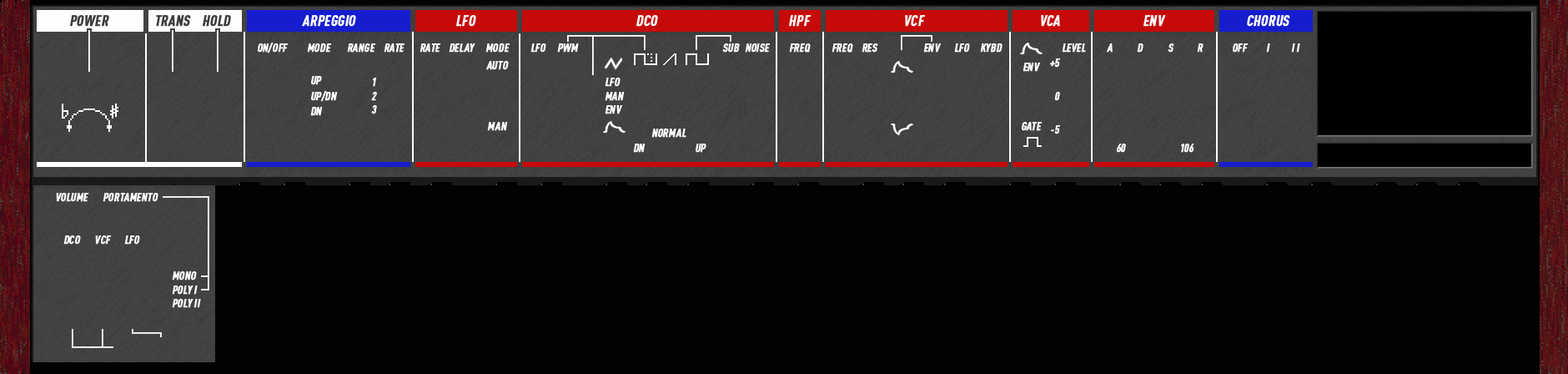
<style>
.page{position:relative;width:1568px;height:374px;background:#020202}
.page>*{position:absolute;margin:0}
.t1{font:14.6px "DINPro-CondensedBold";color:#3e3e3e;font-weight:bold;font-style:italic}
.t2{font:14.6px "DINPro-CondensedBold";color:#ffffff;font-weight:bold;font-style:italic}
.t3{font:11.4px "DINPro-CondensedBold";color:#fefefe;font-weight:bold;font-style:italic}
.t4{font:11.4px/15.4px "DINPro-CondensedBold";color:#fefefe;font-weight:bold;font-style:italic}
</style>
<div class="page">
<p class="t1" style="left:70px;top:15px;width:39px;height:12px">POWER</p>
<p class="t1" style="left:156px;top:15px;width:35px;height:12px">TRANS</p>
<p class="t1" style="left:203px;top:15px;width:28px;height:12px">HOLD</p>
<p class="t2" style="left:302px;top:15px;width:54px;height:12px">ARPEGGIO</p>
<p class="t2" style="left:456px;top:15px;width:20px;height:12px">LFO</p>
<p class="t2" style="left:636px;top:15px;width:22px;height:12px">DCO</p>
<p class="t2" style="left:789px;top:15px;width:23px;height:12px">HPF</p>
<p class="t2" style="left:905px;top:15px;width:21px;height:12px">VCF</p>
<p class="t2" style="left:1041px;top:15px;width:19px;height:12px">VCA</p>
<p class="t2" style="left:1143px;top:15px;width:23px;height:12px">ENV</p>
<p class="t2" style="left:1247px;top:15px;width:43px;height:12px">CHORUS</p>
<p class="t3" style="left:258px;top:43px;width:31px;height:10px">ON/OFF</p>
<p class="t3" style="left:307px;top:43px;width:25px;height:10px">MODE</p>
<p class="t3" style="left:347px;top:43px;width:29px;height:10px">RANGE</p>
<p class="t3" style="left:384px;top:43px;width:21px;height:10px">RATE</p>
<p class="t3" style="left:420px;top:43px;width:21px;height:10px">RATE</p>
<p class="t3" style="left:449px;top:43px;width:26px;height:10px">DELAY</p>
<p class="t3" style="left:485px;top:43px;width:25px;height:10px">MODE</p>
<p class="t3" style="left:530px;top:43px;width:16px;height:10px">LFO</p>
<p class="t3" style="left:557px;top:43px;width:22px;height:10px">PWM</p>
<p class="t3" style="left:722px;top:43px;width:18px;height:10px">SUB</p>
<p class="t3" style="left:745px;top:43px;width:26px;height:10px">NOISE</p>
<p class="t3" style="left:789px;top:43px;width:22px;height:10px">FREQ</p>
<p class="t3" style="left:832px;top:43px;width:21px;height:10px">FREQ</p>
<p class="t3" style="left:862px;top:43px;width:16px;height:10px">RES</p>
<p class="t3" style="left:923px;top:43px;width:18px;height:10px">ENV</p>
<p class="t3" style="left:954px;top:43px;width:16px;height:10px">LFO</p>
<p class="t3" style="left:980px;top:43px;width:23px;height:10px">KYBD</p>
<p class="t3" style="left:1062px;top:43px;width:24px;height:10px">LEVEL</p>
<p class="t3" style="left:1107px;top:43px;width:6px;height:10px">A</p>
<p class="t3" style="left:1137px;top:43px;width:6px;height:10px">D</p>
<p class="t3" style="left:1168px;top:43px;width:6px;height:10px">S</p>
<p class="t3" style="left:1197px;top:43px;width:7px;height:10px">R</p>
<p class="t3" style="left:1233px;top:43px;width:16px;height:10px">OFF</p>
<p class="t3" style="left:1266px;top:43px;width:4px;height:10px">I</p>
<p class="t3" style="left:1291px;top:43px;width:9px;height:10px">I I</p>
<p class="t3" style="left:486px;top:61px;width:23px;height:9px">AUTO</p>
<p class="t3" style="left:1023px;top:63px;width:17px;height:9px">ENV</p>
<p class="t3" style="left:1050px;top:58px;width:10px;height:10px">+5</p>
<p class="t4" style="left:310px;top:76px;width:28px;height:40px"><span class="t3">U</span>P<br>UP/DN<br>DN</p>
<p class="t3" style="left:371px;top:78px;width:6px;height:36px">1<br>2<br>3</p>
<p class="t3" style="left:605px;top:78px;width:20px;height:36px">LFO<br>MAN<br>ENV</p>
<p class="t3" style="left:1054px;top:92px;width:6px;height:9px">0</p>
<p class="t3" style="left:487px;top:122px;width:21px;height:9px">MAN</p>
<p class="t3" style="left:1022px;top:122px;width:21px;height:9px">GATE</p>
<p class="t3" style="left:1051px;top:125px;width:9px;height:9px">-5</p>
<p class="t3" style="left:651px;top:128px;width:35px;height:10px">NORMAL</p>
<p class="t3" style="left:633px;top:143px;width:13px;height:10px">DN</p>
<p class="t3" style="left:696px;top:143px;width:10px;height:10px">UP</p>
<p class="t3" style="left:1116px;top:143px;width:10px;height:10px">60</p>
<p class="t3" style="left:1181px;top:143px;width:13px;height:10px">106</p>
<p class="t3" style="left:56px;top:193px;width:33px;height:9px">VOLUME</p>
<p class="t3" style="left:103px;top:193px;width:55px;height:9px">PORTAMENTO</p>
<p class="t3" style="left:63px;top:235px;width:18px;height:9px">DCO</p>
<p class="t3" style="left:95px;top:235px;width:17px;height:9px">VCF</p>
<p class="t3" style="left:124px;top:235px;width:16px;height:9px">LFO</p>
<p class="t3" style="left:172px;top:271px;width:29px;height:37px">MONO<br>POLY I <br>POLY II</p>
</div>
